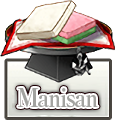
<style>
.page{position:relative;width:115px;height:120px;background:#ffffff}
.page>*{position:absolute;margin:0}
.t1{font:25px "RyuminPro-ExBold";letter-spacing:-0.08em;color:#a3a3a0;scale:0.9 1}
</style>
<div class="page">
<p class="t1" style="left:18px;top:88px;width:80px;height:20px">Manisan</p>
</div>
